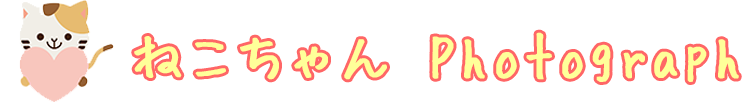
<style>
.page{position:relative;width:755px;height:102px;background:#ffffff}
.page>*{position:absolute;margin:0}
.t1{font:60.5px "HuiFontP";color:#ffff99;font-weight:bold}
</style>
<div class="page">
<p class="t1" style="left:134px;top:32px;width:605px;height:50px">ねこちゃん Photograph</p>
</div>
